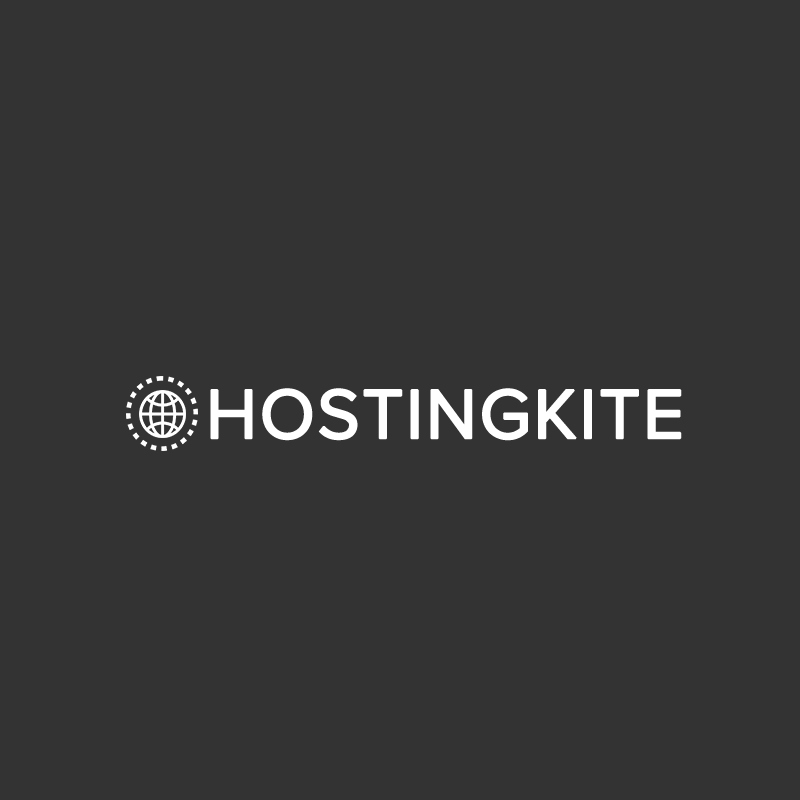
<style>
.page{position:relative;width:800px;height:800px;background:#333333}
.page>*{position:absolute;margin:0}
.t1{font:72px "ProximaNova-Regular";letter-spacing:0.01em;color:#ffffff;font-weight:bold}
</style>
<div class="page">
<p class="t1" style="left:210px;top:388px;width:472px;height:53px">HOSTINGKITE</p>
</div>
